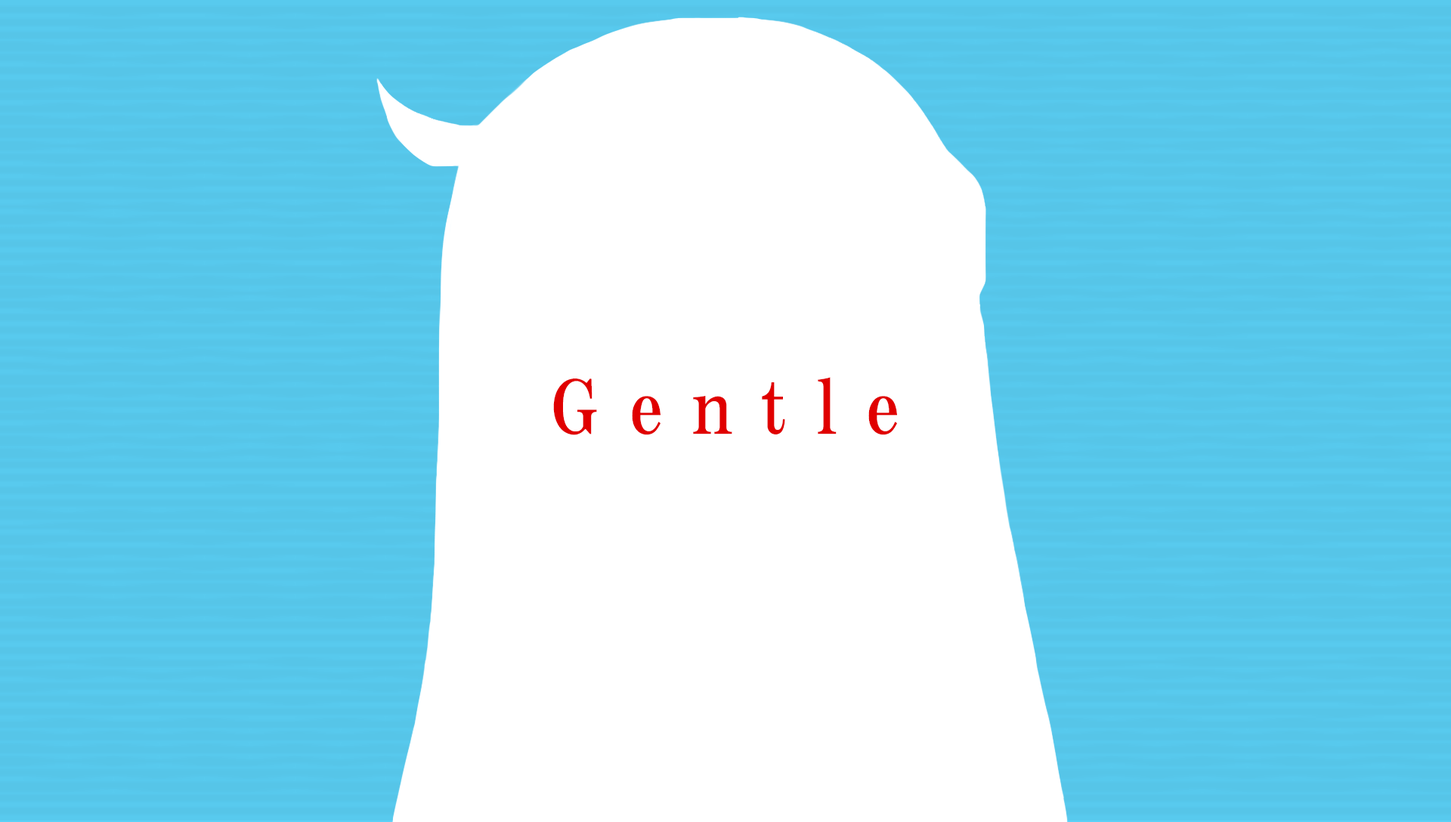
<style>
.page{position:relative;width:1451px;height:822px;background:#ffffff}
.page>*{position:absolute;margin:0}
.t1{font:73.8px "HGPMinchoE";letter-spacing:0.4em;color:#e00000}
</style>
<div class="page">
<p class="t1" style="left:553px;top:377px;width:344px;height:58px">Gentle</p>
</div>
